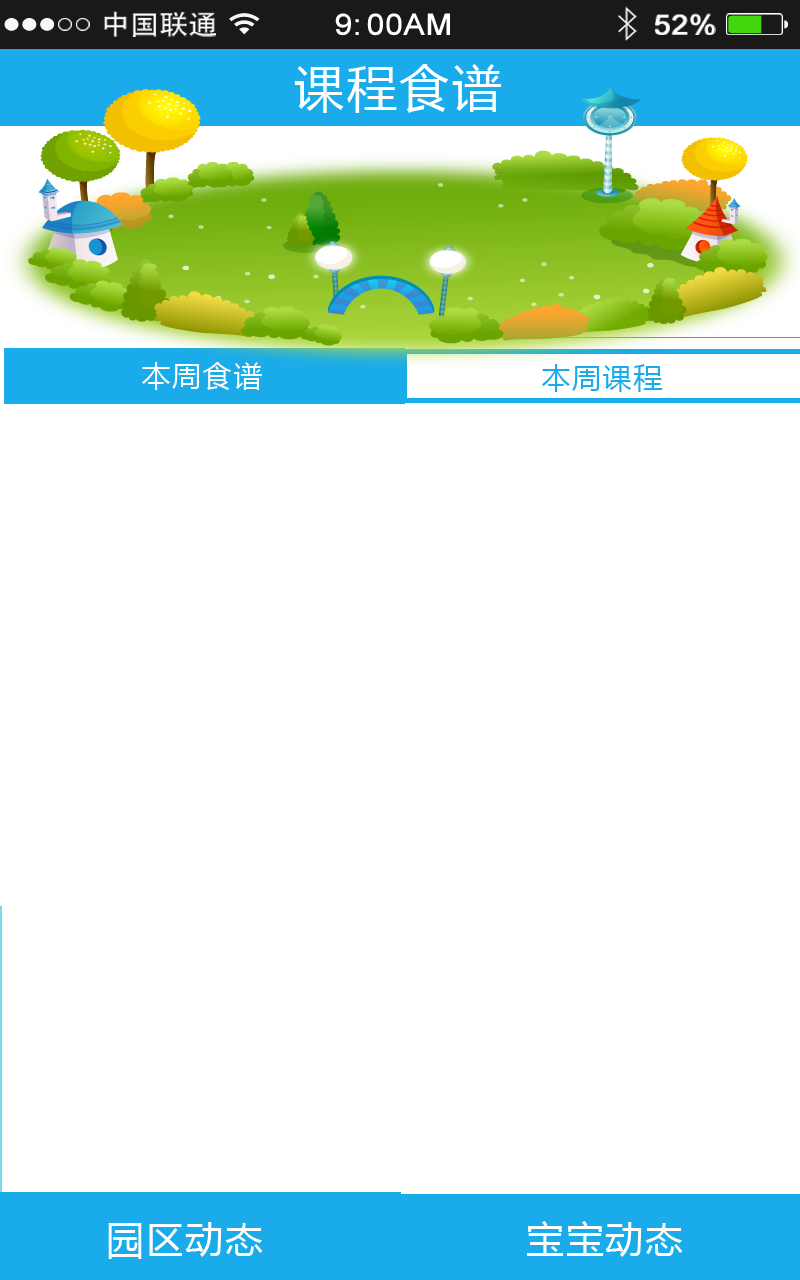
<style>
.page{position:relative;width:800px;height:1280px;background:#fffffe}
.page>*{position:absolute;margin:0}
.t1{font:26.8px "AdobeHeitiStd-Regular";color:#ffffff;scale:1.09 1}
.t2{font:29.2px "ArialMT";color:#ffffff;font-weight:bold;scale:1.09 1}
.t3{font:28px "ArialMT";color:#ffffff;font-weight:bold;scale:1.09 1}
.t4{font:50px "MicrosoftYaHei";letter-spacing:0.05em;color:#ffffff}
.t5{font:29.2px "MicrosoftYaHei";letter-spacing:0.05em;color:#fefefe}
.t6{font:29.2px "MicrosoftYaHei";letter-spacing:0.05em;color:#1aabea}
.t7{font:37.5px "MicrosoftYaHei";letter-spacing:0.05em;color:#fffffe}
</style>
<div class="page">
<p class="t1" style="left:104px;top:11px;width:112px;height:26px">中国联通</p>
<p class="t2" style="left:335px;top:13px;width:115px;height:23px">9:00AM</p>
<p class="t3" style="left:655px;top:13px;width:61px;height:22px">52%</p>
<p class="t4" style="left:294px;top:64px;width:207px;height:49px">课程食谱</p>
<p class="t5" style="left:142px;top:362px;width:120px;height:28px">本周食谱</p>
<p class="t6" style="left:542px;top:364px;width:121px;height:28px">本周课程</p>
<p class="t7" style="left:108px;top:1222px;width:155px;height:37px">园区动态</p>
<p class="t7" style="left:527px;top:1221px;width:156px;height:36px">宝宝动态</p>
</div>
